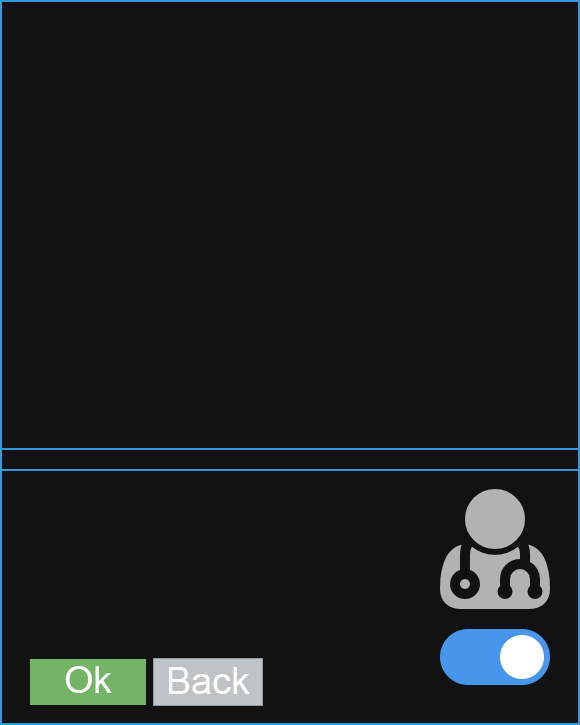
<style>
.page{position:relative;width:580px;height:725px;background:#131212}
.page>*{position:absolute;margin:0}
.t1{font:38px "ArialMT";color:#ffffff}
</style>
<div class="page">
<p class="t1" style="left:65px;top:666px;width:47px;height:27px">Ok</p>
<p class="t1" style="left:168px;top:667px;width:82px;height:27px">Back</p>
</div>
